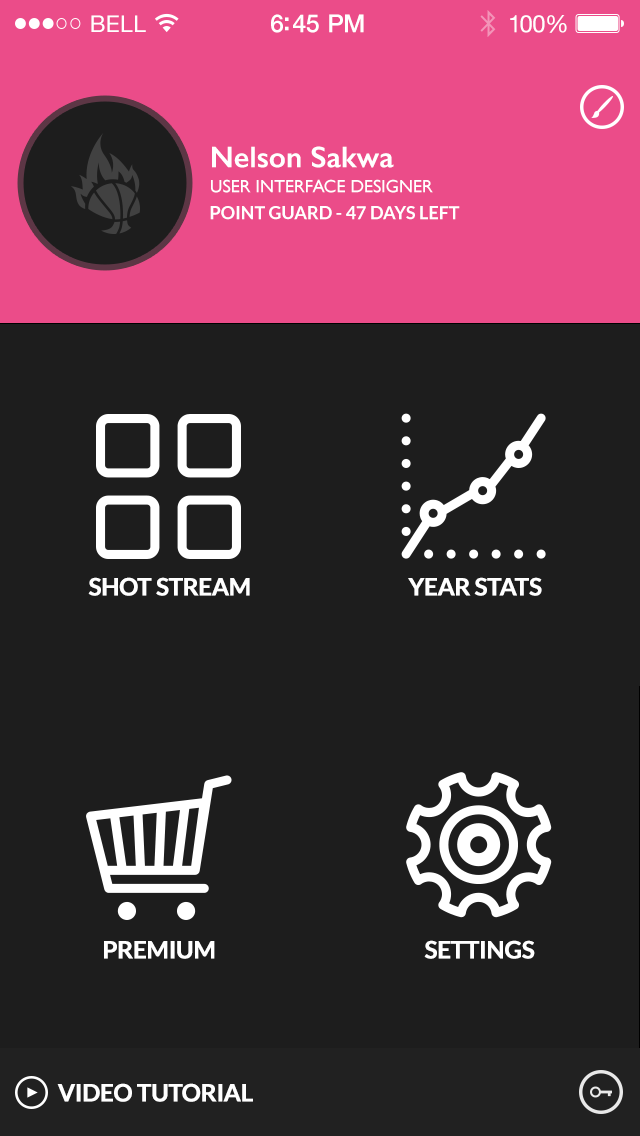
<style>
.page{position:relative;width:640px;height:1136px;background:#1d1d1d}
.page>*{position:absolute;margin:0}
.t1{font:23px "HelveticaNeue";letter-spacing:0.02em;color:#ffffff}
.t2{font:25px "HelveticaNeue-Medium";letter-spacing:-0.02em;color:#ffffff}
.t3{font:24px "HelveticaNeue";letter-spacing:-0.02em;color:#ffffff}
.t4{font:30px "GillSans-SemiBold";color:#ffffff}
.t5{font:18px "GillSans";color:#ffffff;text-transform:uppercase}
.t6{font:18px "Lato-Bold";color:#ffffff;text-transform:uppercase}
.t7{font:24px "Lato-Bold";letter-spacing:-0.02em;color:#ffffff;text-transform:uppercase;font-weight:bold}
</style>
<div class="page">
<p class="t1" style="left:91px;top:15px;width:55px;height:17px">BELL</p>
<p class="t2" style="left:271px;top:14px;width:93px;height:19px">6:45 PM</p>
<p class="t3" style="left:510px;top:15px;width:57px;height:18px">100%</p>
<p class="t4" style="left:212px;top:146px;width:182px;height:22px">Nelson Sakwa</p>
<p class="t5" style="left:211px;top:179px;width:222px;height:14px">user interface designer</p>
<p class="t6" style="left:210px;top:206px;width:250px;height:14px">point guard - 47 days left</p>
<p class="t7" style="left:88px;top:577px;width:162px;height:19px">shot stream</p>
<p class="t7" style="left:408px;top:577px;width:134px;height:19px">year stats</p>
<p class="t7" style="left:104px;top:941px;width:111px;height:18px">premium</p>
<p class="t7" style="left:424px;top:940px;width:111px;height:19px">Settings</p>
<p class="t7" style="left:57px;top:1083px;width:196px;height:19px">video tutorial</p>
</div>
